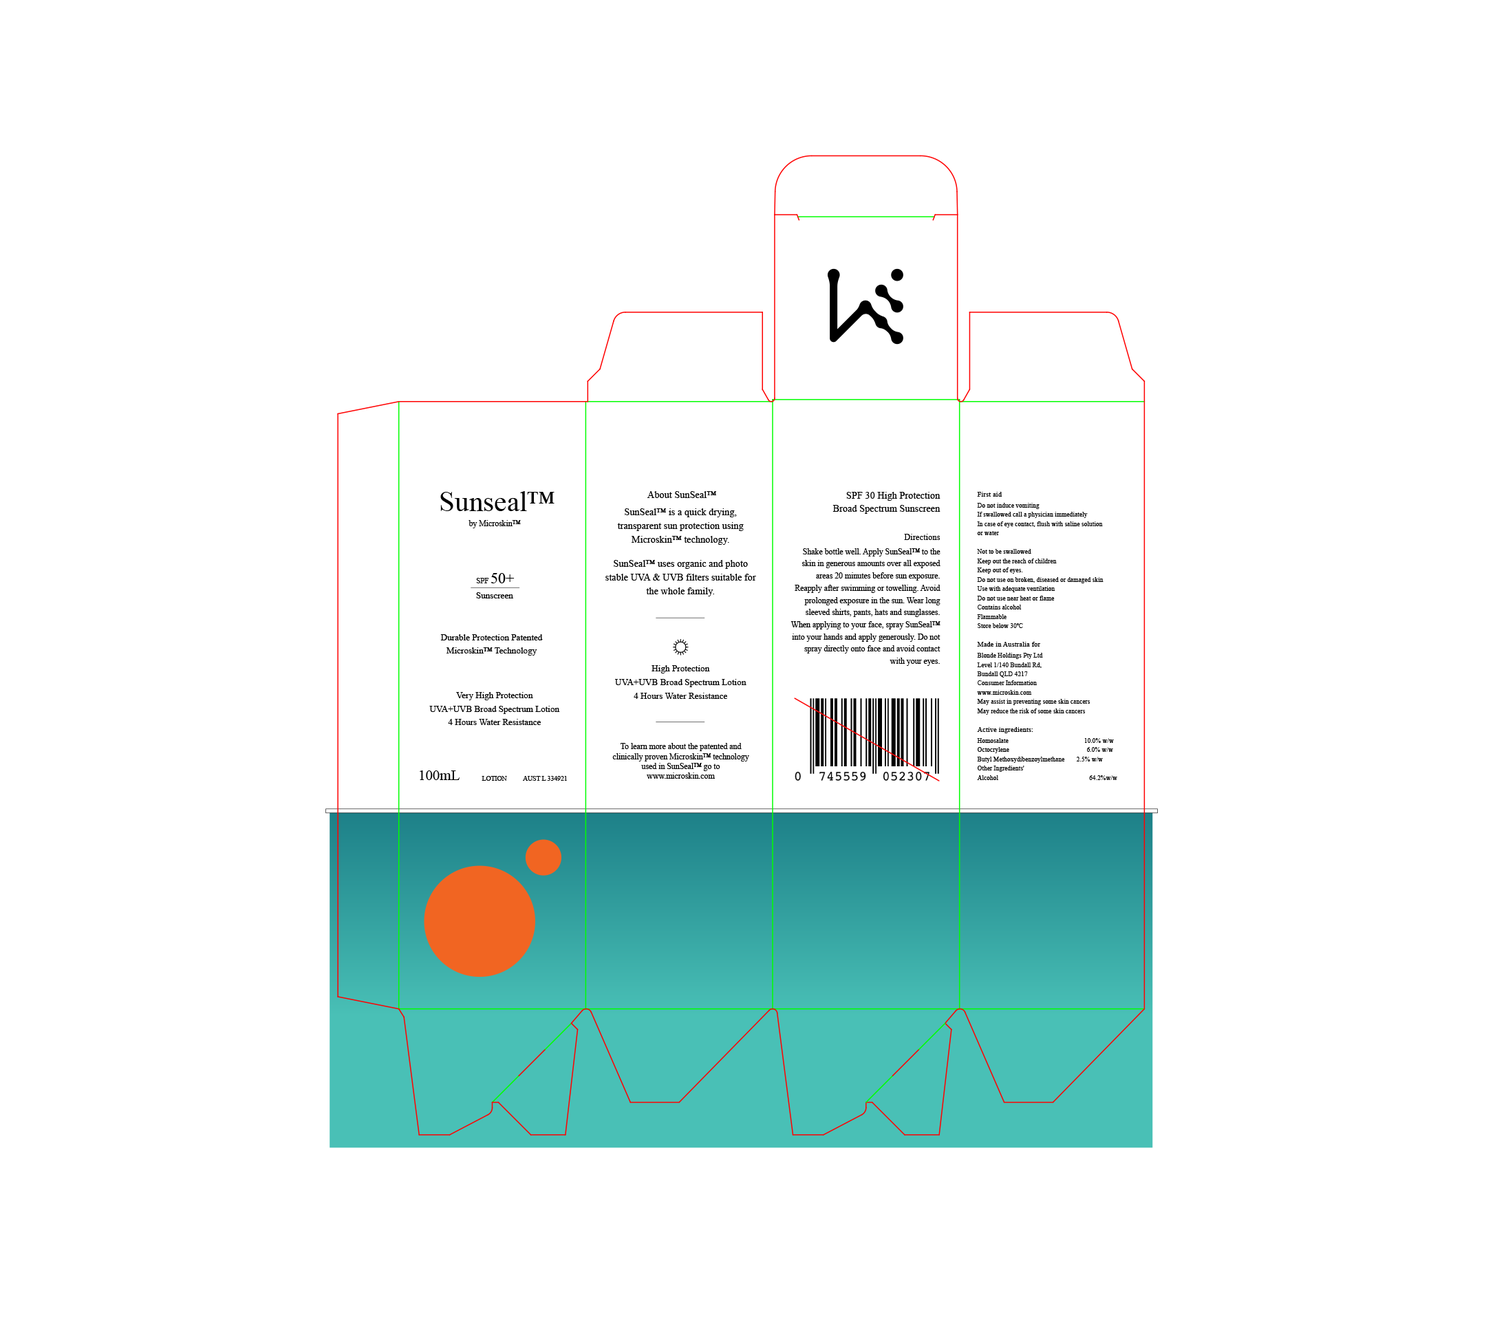
<style>
.page{position:relative;width:1506px;height:1318px;background:#ffffff}
.page>*{position:absolute;margin:0}
.t1{font:28.4px "AHAMONO-Regular";color:#000000}
.t2{font:9.8px "HelveticaNowText-Medium";color:#000000}
.t3{font:9.8px/13.1px "HelveticaNowText-Medium";color:#000000}
.t4{font:6.5px/9.3px "HelveticaNowText-Light";color:#000000}
.t5{font:6.9px/11.2px "HelveticaNowText-Bold";letter-spacing:0.025em;color:#000000}
.t6{font:9.8px/13.8px "HelveticaNowText-Light";color:#000000}
.t7{font:8.1px "HelveticaNowText-Medium";color:#000000}
.t8{font:8.1px/12.2px "HelveticaNowText-Light";color:#000000}
.t9{font:8.1px/12.2px "HelveticaNowText-Bold";letter-spacing:0.025em;color:#000000}
.t10{font:7.5px "HelveticaNowText-Medium";color:#000000}
.t11{font:15px "HelveticaNowText-Medium";color:#000000}
.t12{font:9px "AHAMONO-Regular";color:#000000}
.t13{font:9px/13.4px "AHAMONO-Regular";color:#000000}
.t14{font:9.1px/15.2px "HelveticaNowText-Medium";color:#000000}
.t15{font:8.1px/9.7px "HelveticaNowText-Light";color:#000000}
.t16{font:14.4px "AHAMONO-Regular";color:#000000}
.t17{font:6.7px "HelveticaNowText-Regular";color:#000000}
</style>
<div class="page">
<p class="t1" style="left:440px;top:491px;width:115px;height:20px">Sunseal™</p>
<p class="t2" style="left:647px;top:491px;width:69px;height:7px">About SunSeal™</p>
<p class="t3" style="left:832px;top:492px;width:108px;height:22px;text-align:right">SPF 30 High Protection<br>Broad Spectrum Sunscreen</p>
<p class="t4" style="left:977px;top:492px;width:140px;height:288px"><span class="t5">First aid<br></span>Do not induce vomiting<br>If swallowed call a physician immediately<br>In case of eye contact, flush with saline solution<br>or water<br><br>Not to be swallowed<br>Keep out the reach of children<br>Keep out of eyes.<br>Do not use on broken, diseased or damaged skin<br>Use with adequate ventilation<br>Do not use near heat or flame<br>Contains alcohol<br>Flammable<br>Store below 30ºC<br><br><span class="t5">Made in Australia for<br></span>Blonde Holdings Pty Ltd<br>Level 1/140 Bundall Rd,<br>Bundall QLD 4217<br>Consumer Information<br>www.microskin.com<br>May assist in preventing some skin cancers<br>May reduce the risk of some skin cancers<br><br><span class="t5">Active ingredients:<br></span>Homosalate                               10.0% w/w<br>Octocrylene                               6.0% w/w<br>Butyl Methoxydibenzoylmethane      2.5% w/w<br>Other Ingredients'<br>Alcohol                                     64.2%w/w</p>
<p class="t6" style="left:605px;top:508px;width:151px;height:88px;text-align:center">SunSeal™ is a quick drying, transparent sun protection using Microskin™ technology.<br><br>SunSeal™ uses organic and photo stable UVA &amp; UVB filters suitable for the whole family.</p>
<p class="t7" style="left:469px;top:520px;width:52px;height:8px">by Microskin™</p>
<p class="t8" style="left:790px;top:534px;width:150px;height:132px;text-align:right"><span class="t9">Directions<br></span>Shake bottle well. Apply SunSeal™ to the skin in generous amounts over all exposed areas 20 minutes before sun exposure. Reapply after swimming or towelling. Avoid prolonged exposure in the sun. Wear long sleeved shirts, pants, hats and sunglasses. When applying to your face, spray SunSeal™ into your hands and apply generously. Do not spray directly onto face and avoid contact with your eyes.</p>
<p class="t10" style="left:476px;top:573px;width:39px;height:10px">SPF <span class="t11">50+</span></p>
<p class="t12" style="left:476px;top:592px;width:37px;height:7px">Sunscreen</p>
<p class="t13" style="left:440px;top:634px;width:103px;height:22px;text-align:center">Durable Protection Patented<br>Microskin™ Technology</p>
<p class="t14" style="left:615px;top:665px;width:131px;height:34px;text-align:center">High Protection<br>UVA+UVB Broad Spectrum Lotion<br>4 Hours Water Resistance</p>
<p class="t13" style="left:429px;top:692px;width:131px;height:33px;text-align:center">Very High Protection<br>UVA+UVB Broad Spectrum Lotion<br>4 Hours Water Resistance</p>
<p class="t15" style="left:612px;top:743px;width:137px;height:36px;text-align:center">To learn more about the patented and clinically proven Microskin™ technology used in SunSeal™ go to www.microskin.com</p>
<p class="t16" style="left:420px;top:771px;width:40px;height:9px">100mL</p>
<p class="t17" style="left:482px;top:776px;width:25px;height:5px">LOTION</p>
<p class="t17" style="left:523px;top:776px;width:44px;height:5px">AUST L 334921</p>
</div>
